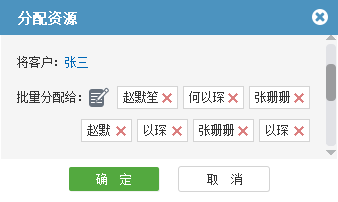
<style>
.page{position:relative;width:338px;height:202px;background:#f5f5f5}
.page>*{position:absolute;margin:0}
.t1{font:14px "SimSun";color:#ffffff;font-weight:bold}
.t2{font:12px "SimSun";color:#333333}
.t3{font:12px "SimSun";color:#0068b7}
.t4{font:12px "SimSun";color:#ffffff}
</style>
<div class="page">
<p class="t1" style="left:18px;top:11px;width:59px;height:14px">分配资源</p>
<p class="t2" style="left:17px;top:56px;width:71px;height:12px">将客户：<span class="t3">张三</span></p>
<p class="t2" style="left:17px;top:91px;width:64px;height:12px">批量分配给：</p>
<p class="t2" style="left:123px;top:91px;width:35px;height:12px">赵默笙</p>
<p class="t2" style="left:189px;top:91px;width:35px;height:12px">何以琛</p>
<p class="t2" style="left:255px;top:91px;width:35px;height:12px">张珊珊</p>
<p class="t2" style="left:87px;top:124px;width:23px;height:12px">赵默</p>
<p class="t2" style="left:144px;top:124px;width:22px;height:12px">以琛</p>
<p class="t2" style="left:199px;top:124px;width:35px;height:12px">张珊珊</p>
<p class="t2" style="left:266px;top:124px;width:22px;height:12px">以琛</p>
<p class="t4" style="left:96px;top:173px;width:35px;height:12px">确  定</p>
<p class="t2" style="left:207px;top:173px;width:35px;height:12px">取  消</p>
</div>
